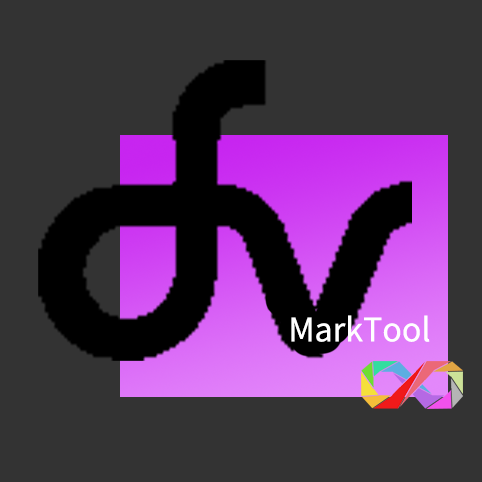
<style>
.page{position:relative;width:482px;height:482px;background:#333333}
.page>*{position:absolute;margin:0}
.t1{font:36px "SourceSansRoman-Regular";color:#ffffff}
</style>
<div class="page">
<p class="t1" style="left:291px;top:315px;width:139px;height:27px">MarkTool</p>
</div>
